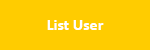
<style>
.page{position:relative;width:150px;height:50px;background:#ffcc00}
.page>*{position:absolute;margin:0}
.t1{font:16px "Calibri-Bold";color:#ffffff}
</style>
<div class="page">
<p class="t1" style="left:47px;top:20px;width:57px;height:10px">List User</p>
</div>
